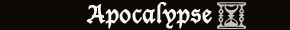
<style>
.page{position:relative;width:290px;height:30px;background:#0d0906}
.page>*{position:absolute;margin:0}
.t1{font:24px "LucidaBlackletter";color:#f8f8f5;font-weight:bold}
</style>
<div class="page">
<p class="t1" style="left:86px;top:2px;width:126px;height:27px">Apocalypse</p>
</div>
